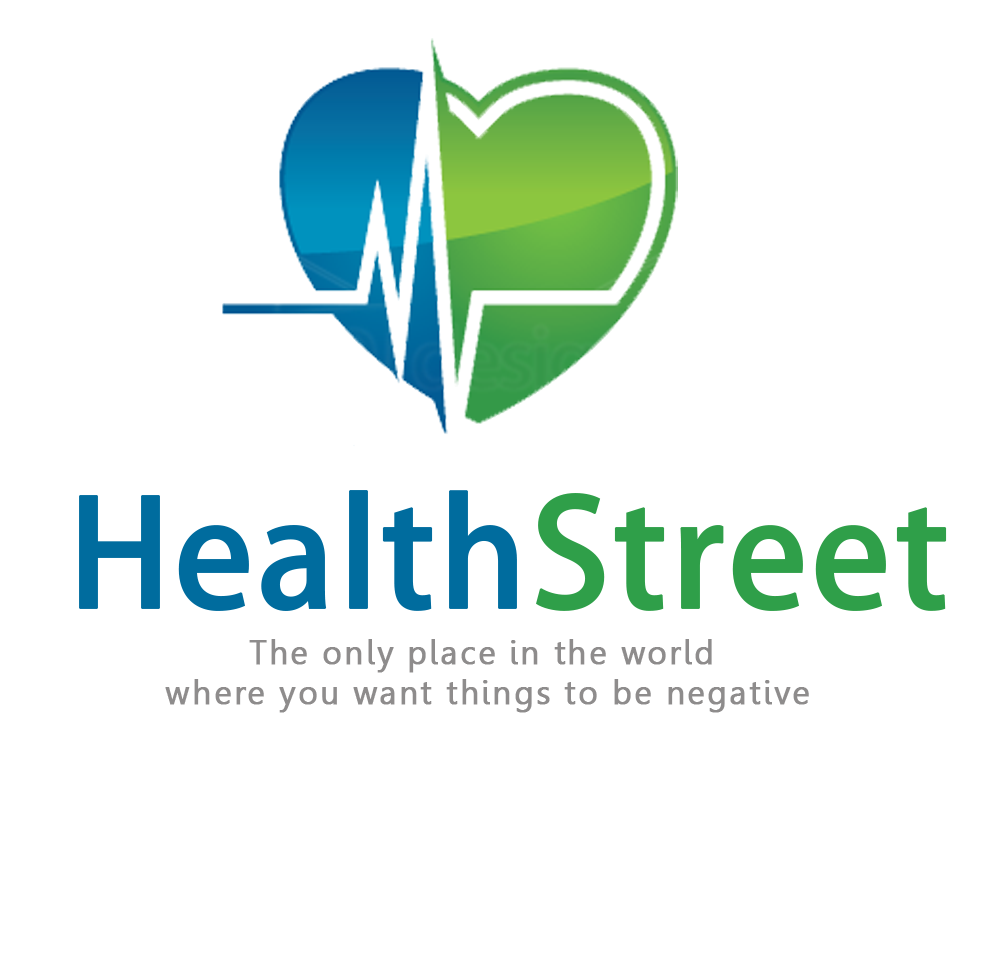
<style>
.page{position:relative;width:1005px;height:965px;background:#ffffff}
.page>*{position:absolute;margin:0}
.t1{font:145.8px "AdobeHeitiStd-Regular";color:#006c9e;font-weight:bold}
.t2{font:145.8px "AdobeHeitiStd-Regular";color:#2f9f49;font-weight:bold}
.t3{font:33.3px "Leelawadee";letter-spacing:0.05em;color:#8e8c8c;font-weight:bold}
</style>
<div class="page">
<p class="t1" style="left:79px;top:490px;width:868px;height:121px">Health<span class="t2">Street</span></p>
<p class="t3" style="left:165px;top:639px;width:644px;height:74px;text-align:center">The only place in the world <br>where you want things to be negative</p>
</div>
